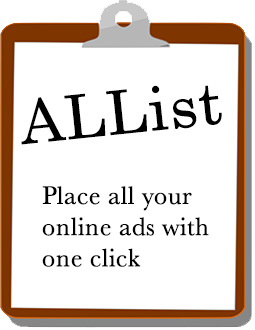
<style>
.page{position:relative;width:255px;height:330px;background:#ffffff}
.page>*{position:absolute;margin:0}
.t1{font:60px "CenturySchoolbook";color:#000000;font-weight:bold}
.t2{font:26px/31.2px "Baskerville";color:#000000;font-weight:bold}
</style>
<div class="page">
<p class="t1" style="left:21px;top:85px;width:201px;height:60px;rotate:-6deg">ALList</p>
<p class="t2" style="left:42px;top:186px;width:167px;height:81px">Place all your online ads with one click</p>
</div>
